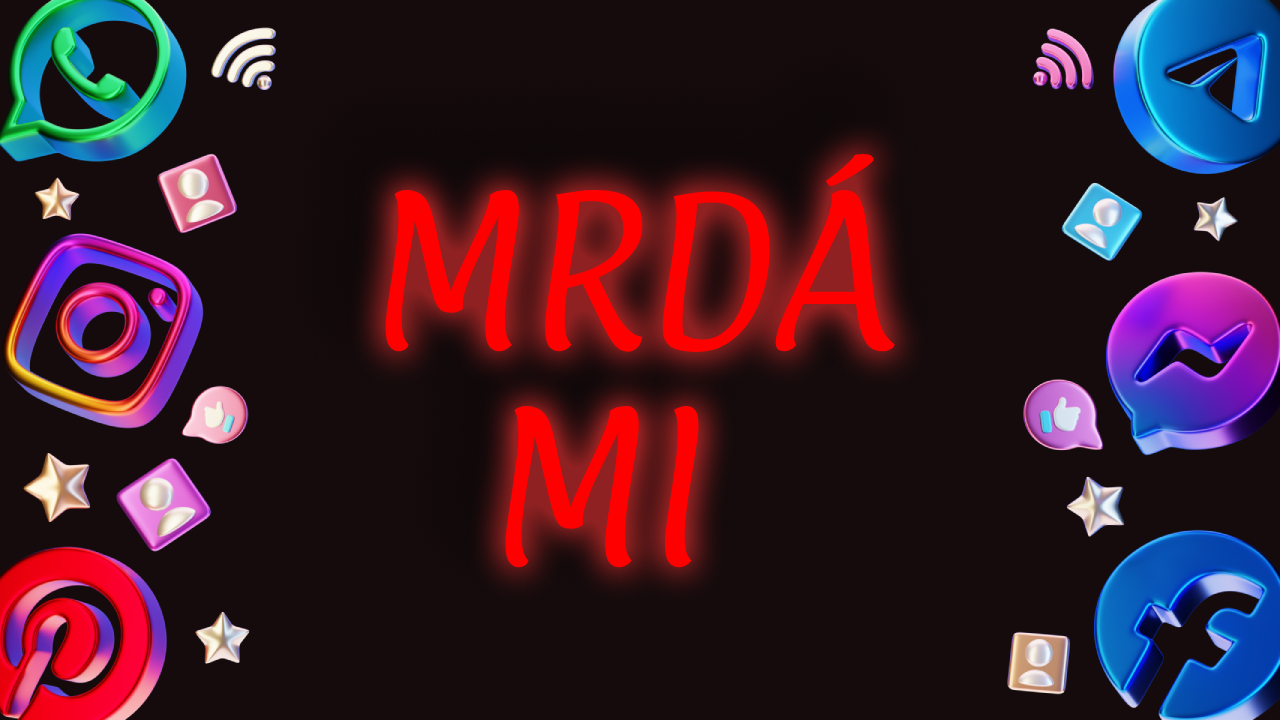
<style>
.page{position:relative;width:1280px;height:720px;background:#150b0c}
.page>*{position:absolute;margin:0}
.t1{font:180px "Paprika-Regular";color:#ff0000}
</style>
<div class="page">
<p class="t1" style="left:385px;top:153px;width:510px;height:415px">MRDÁ<br>  MI</p>
</div>
